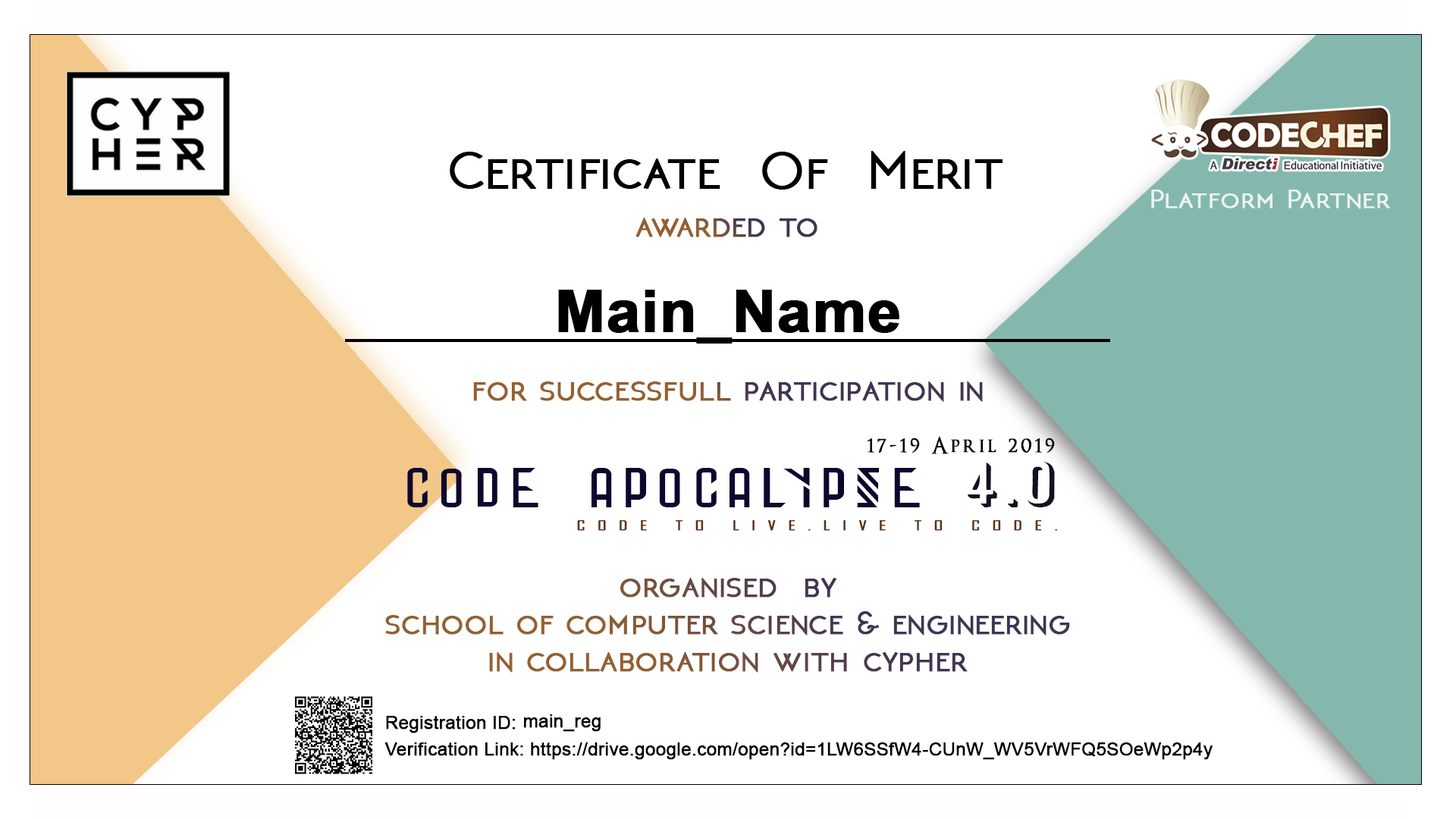
<style>
.page{position:relative;width:1456px;height:819px;background:#ffffff}
.page>*{position:absolute;margin:0}
.t1{font:54.8px "NEOTERIC-Bold";color:#000000;font-weight:bold;scale:1.04 1}
.t2{font:27.1px "NEOTERIC-Bold";letter-spacing:0.02em;color:#ffffff;font-weight:bold;scale:1.12 1}
.t3{font:34.6px "NEOTERIC-Bold";font-weight:bold;scale:1.04 1}
.t4{font:57.6px "Arial-BoldMT";color:#000000;font-weight:bold;scale:1.04 1}
.t5{font:22.6px "OptimusPrinceps";letter-spacing:0.12em;color:#000000;font-weight:bold}
.t6{font:56.3px "StoneWalls";letter-spacing:0.12em;color:#0f062f;scale:1.17 1}
.t7{font:56.3px "StoneWalls";letter-spacing:-0.12em;color:#0f062f;scale:1.17 1}
.t8{font:56.3px "Archer";letter-spacing:0.12em;color:#121122;scale:1.17 1}
.t9{font:13.1px "AgencyFB-Reg";letter-spacing:0.56em;color:#5c2f13;font-weight:bold;scale:1.58 1}
.t10{font:34.6px/37.3px "NEOTERIC-Bold";font-weight:bold;scale:1.04 1}
.t11{font:34.6px/53.6px "NEOTERIC-Bold";font-weight:bold;scale:1.04 1}
.t12{font:17.3px "ArialMT";color:#000000;font-weight:bold;scale:1.04 1}
</style>
<div class="page">
<p class="t1" style="left:450px;top:151px;width:553px;height:39px">Certificate  Of  Merit</p>
<p class="t2" style="left:1151px;top:190px;width:240px;height:19px;opacity:0.83">Platform Partner</p>
<p class="t3" style="left:635px;top:218px;width:182px;height:19px">awarded to</p>
<p class="t4" style="left:558px;top:290px;width:341px;height:54px">Main_Name</p>
<p class="t3" style="left:473px;top:381px;width:510px;height:21px">for successfull participation in</p>
<p class="t5" style="left:867px;top:436px;width:188px;height:18px">17-19 April 2019</p>
<p class="t6" style="left:407px;top:462px;width:648px;height:45px">CODE APOCA<span class="t7">L</span>YPSE <span class="t8">4.0</span></p>
<p class="t9" style="left:577px;top:520px;width:480px;height:11px">CODE TO LIVE.LIVE TO CODE.</p>
<p class="t10" style="left:385px;top:578px;width:685px;height:95px;text-align:center"><span class="t11">organised  by<br></span>school of computer science &amp; engineering<br>in collaboration with cypher</p>
<p class="t12" style="left:386px;top:716px;width:129px;height:17px">Registration ID:</p>
<p class="t12" style="left:524px;top:714px;width:77px;height:18px">main_reg</p>
<p class="t12" style="left:384px;top:742px;width:829px;height:18px">Verification Link: https://drive.google.com/open?id=1LW6SSfW4-CUnW_WV5VrWFQ5SOeWp2p4y</p>
</div>
